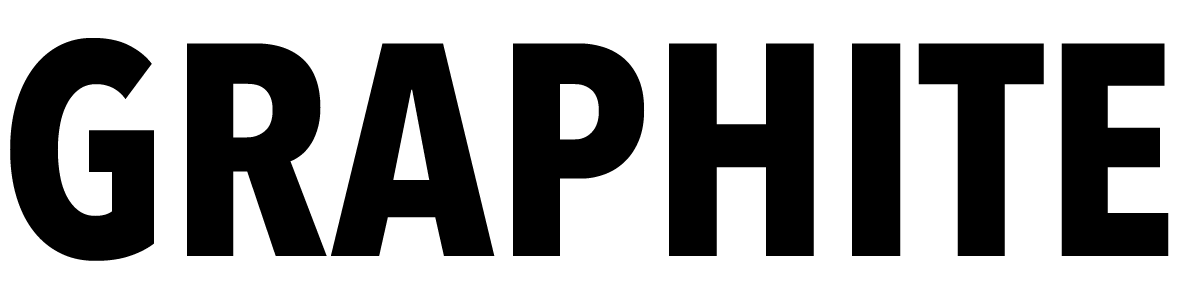
<style>
.page{position:relative;width:1200px;height:300px;background:#ffffff}
.page>*{position:absolute;margin:0}
.t1{font:300px "AvenirNextCondensed-Bold";color:#000000}
</style>
<div class="page">
<p class="t1" style="left:10px;top:38px;width:1159px;height:223px">GRAPHITE</p>
</div>
